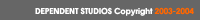
<style>
.page{position:relative;width:200px;height:20px;background:#666666}
.page>*{position:absolute;margin:0}
.t1{font:8px "Atlanta-Demi";color:#ffffff}
.t2{font:8px "Atlanta-Demi";color:#ff6600}
</style>
<div class="page">
<p class="t1" style="left:35px;top:7px;width:159px;height:9px">DEPENDENT STUDIOS Copyright<span class="t2"> 2003-2004</span></p>
</div>
